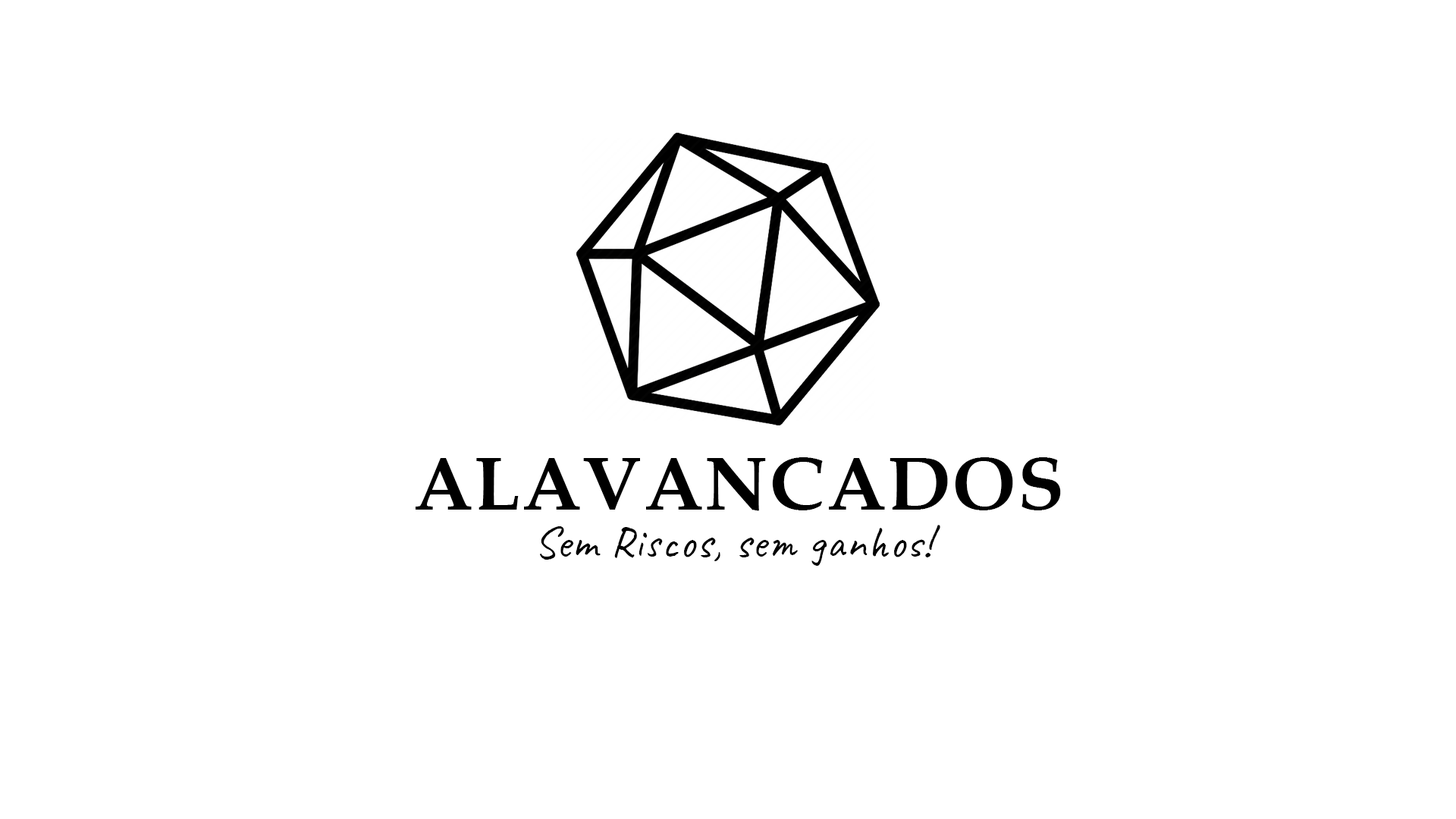
<style>
.page{position:relative;width:1456px;height:819px;background:#ffffff}
.page>*{position:absolute;margin:0}
.t1{font:75.8px "BookAntiqua-Bold";letter-spacing:0.025em;color:#000000}
.t2{font:45.5px "Caveat-Regular";letter-spacing:0.025em;color:#000000}
</style>
<div class="page">
<p class="t1" style="left:416px;top:457px;width:645px;height:54px">ALAVANCADOS</p>
<p class="t2" style="left:539px;top:525px;width:401px;height:41px">Sem Riscos, sem ganhos!</p>
</div>
